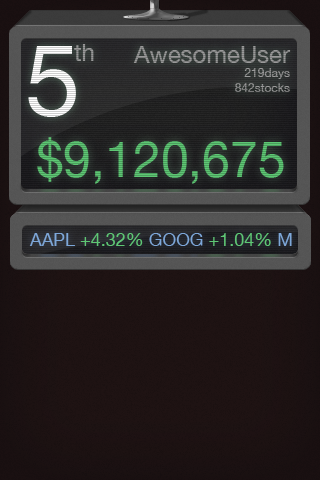
<style>
.page{position:relative;width:320px;height:480px}
.page>*{position:absolute;margin:0}
.t1{font:100px "HelveticaNeue"}
.t2{font:24px "HelveticaNeue";color:#959595}
.t3{font:12px "HelveticaNeue";color:#959595}
.t4{font:50px "HelveticaNeue"}
.t5{font:18px "HelveticaNeue";color:#5ec774}
.t6{font:18px "HelveticaNeue";color:#7da7d9}
</style>
<div class="page">
<p class="t1" style="left:28px;top:46px;width:48px;height:71px">5</p>
<p class="t2" style="left:74px;top:44px;width:20px;height:17px">th</p>
<p class="t3" style="left:133px;top:46px;width:158px;height:46px;text-align:right"><span class="t2">AwesomeUser<br></span>219days<br>842stocks</p>
<p class="t4" style="left:37px;top:137px;width:247px;height:47px">$9,120,675</p>
<p class="t5" style="left:29px;top:233px;width:263px;height:13px"><span class="t6">AAPL </span>+4.32%<span class="t6"> GOOG </span>+1.04% <span class="t6">M</span></p>
</div>
